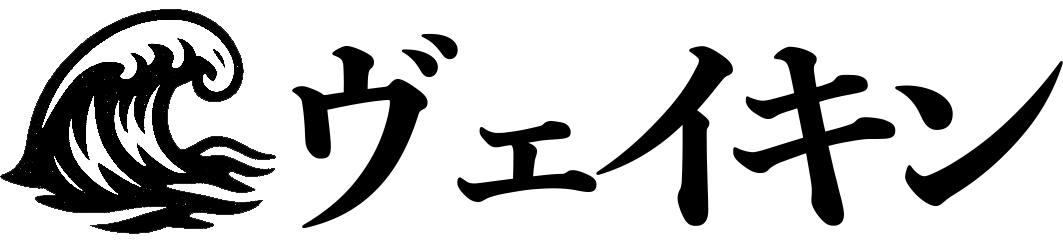
<style>
.page{position:relative;width:1063px;height:248px;background:#ffffff}
.page>*{position:absolute;margin:0}
.t1{font:218.6px "ToppanBunkyuMidashiMinchoStdN-ExtraBold";color:#000000}
</style>
<div class="page">
<p class="t1" style="left:292px;top:33px;width:771px;height:196px">ヴェイキン</p>
</div>
